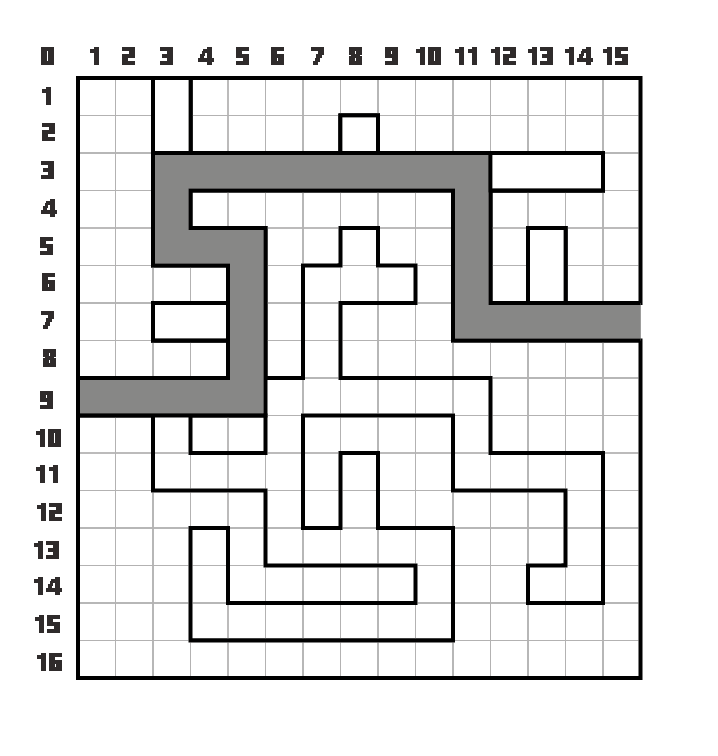
<style>
.page{position:relative;width:718px;height:756px;background:#ffffff}
.page>*{position:absolute;margin:0}
.t1{font:25px "MinecraftTen";letter-spacing:0.04em;color:#2f2b2b}
</style>
<div class="page">
<p class="t1" style="left:41px;top:47px;width:13px;height:18px">0</p>
<p class="t1" style="left:90px;top:47px;width:9px;height:18px">1</p>
<p class="t1" style="left:122px;top:47px;width:13px;height:18px">2</p>
<p class="t1" style="left:160px;top:47px;width:13px;height:18px">3</p>
<p class="t1" style="left:198px;top:47px;width:16px;height:18px">4</p>
<p class="t1" style="left:236px;top:47px;width:13px;height:18px">5</p>
<p class="t1" style="left:271px;top:47px;width:13px;height:18px">6</p>
<p class="t1" style="left:311px;top:47px;width:13px;height:18px">7</p>
<p class="t1" style="left:349px;top:47px;width:13px;height:18px">8</p>
<p class="t1" style="left:385px;top:47px;width:13px;height:18px">9</p>
<p class="t1" style="left:416px;top:47px;width:25px;height:18px">10</p>
<p class="t1" style="left:455px;top:47px;width:22px;height:18px">11</p>
<p class="t1" style="left:491px;top:47px;width:25px;height:18px">12</p>
<p class="t1" style="left:528px;top:47px;width:25px;height:18px">13</p>
<p class="t1" style="left:565px;top:47px;width:28px;height:18px">14</p>
<p class="t1" style="left:603px;top:47px;width:25px;height:18px">15</p>
<p class="t1" style="left:42px;top:87px;width:9px;height:18px">1</p>
<p class="t1" style="left:42px;top:123px;width:13px;height:18px">2</p>
<p class="t1" style="left:41px;top:161px;width:13px;height:18px">3</p>
<p class="t1" style="left:41px;top:199px;width:16px;height:18px">4</p>
<p class="t1" style="left:40px;top:237px;width:13px;height:18px">5</p>
<p class="t1" style="left:42px;top:273px;width:13px;height:18px">6</p>
<p class="t1" style="left:41px;top:311px;width:13px;height:18px">7</p>
<p class="t1" style="left:43px;top:349px;width:13px;height:18px">8</p>
<p class="t1" style="left:40px;top:391px;width:13px;height:18px">9</p>
<p class="t1" style="left:36px;top:429px;width:25px;height:18px">10</p>
<p class="t1" style="left:36px;top:465px;width:22px;height:18px">11</p>
<p class="t1" style="left:37px;top:503px;width:25px;height:18px">12</p>
<p class="t1" style="left:34px;top:541px;width:25px;height:18px">13</p>
<p class="t1" style="left:34px;top:577px;width:28px;height:18px">14</p>
<p class="t1" style="left:35px;top:615px;width:25px;height:18px">15</p>
<p class="t1" style="left:37px;top:653px;width:25px;height:18px">16</p>
</div>
